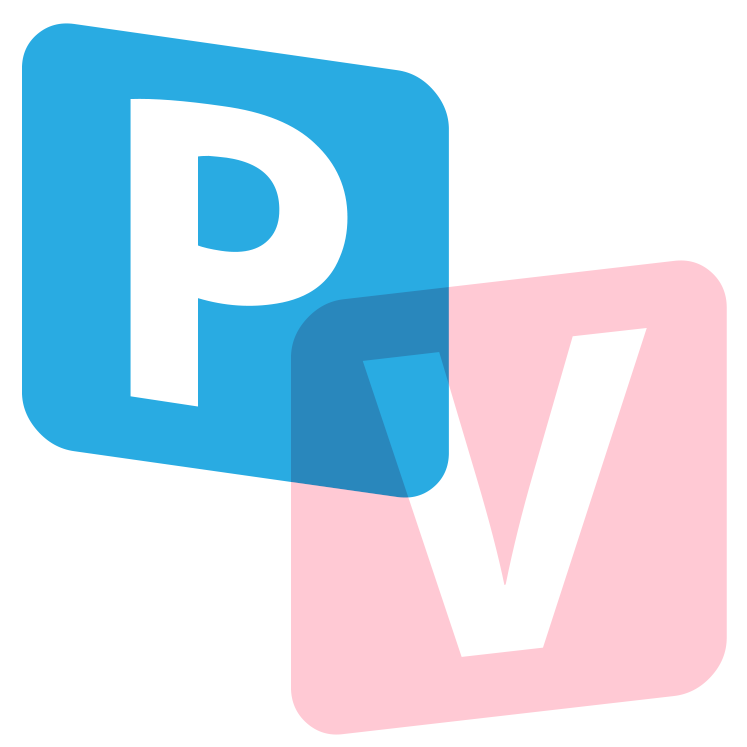
<style>
.page{position:relative;width:747px;height:747px;background:#ffffff}
.page>*{position:absolute;margin:0}
.t1{font:592.9px "Squarekids";color:#29abe2}
.t2{font:592.9px "Squarekids";color:#ffc9d4}
</style>
<div class="page">
<p class="t1" style="left:22px;top:23px;width:427px;height:475px">P</p>
<p class="t2" style="left:291px;top:260px;width:436px;height:475px">v</p>
</div>
